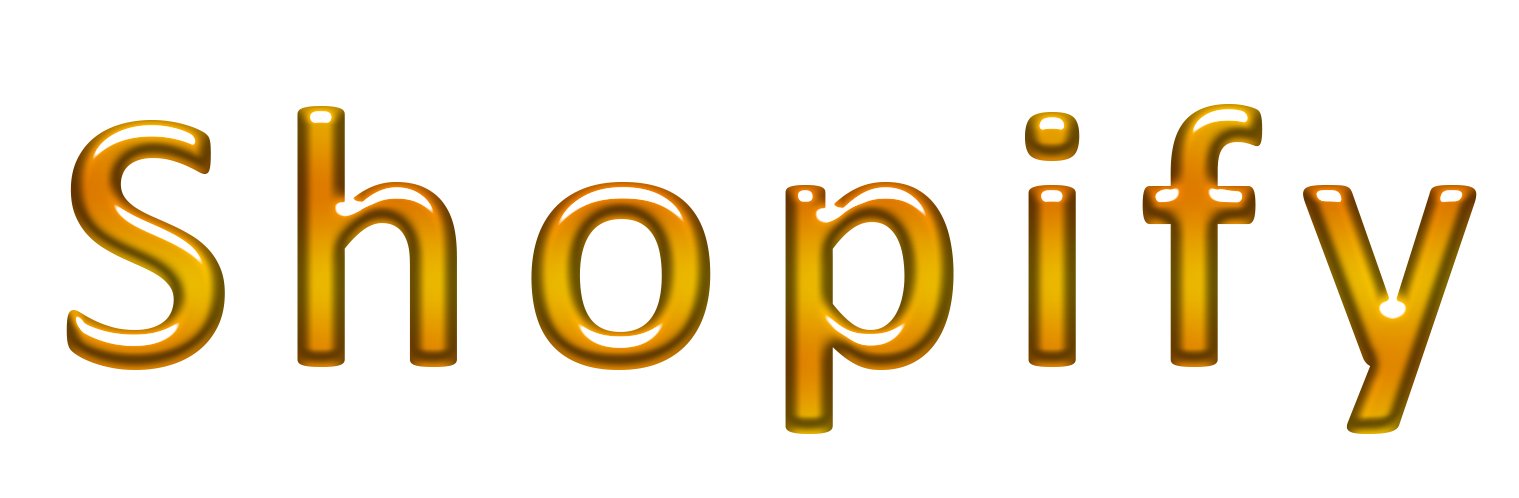
<style>
.page{position:relative;width:1519px;height:498px;background:#ffffff}
.page>*{position:absolute;margin:0}
.t1{font:382.8px "Calibri-Bold";letter-spacing:0.1em}
</style>
<div class="page">
<p class="t1" style="left:66px;top:104px;width:1411px;height:330px">Shopify</p>
</div>
